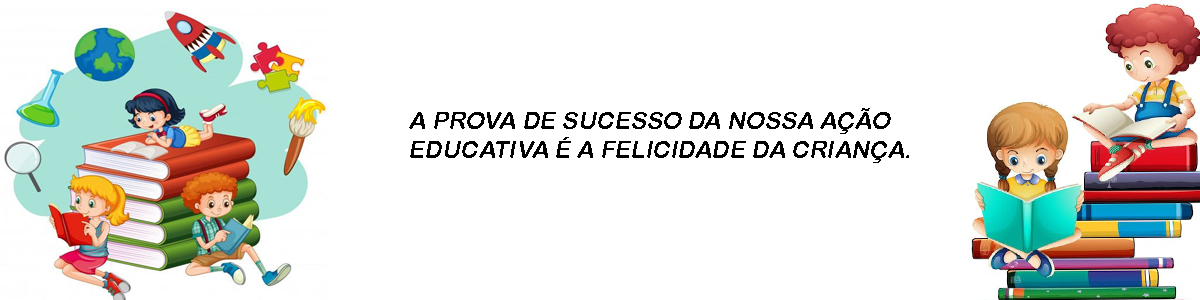
<style>
.page{position:relative;width:1200px;height:300px;background:#ffffff}
.page>*{position:absolute;margin:0}
.t1{font:24px "ArialRoundedMTBold";color:#010101;text-transform:uppercase;font-style:italic}
</style>
<div class="page">
<p class="t1" style="left:409px;top:108px;width:500px;height:55px">A prova de sucesso da nossa ação <br>educativa é a felicidade da criança.</p>
</div>
